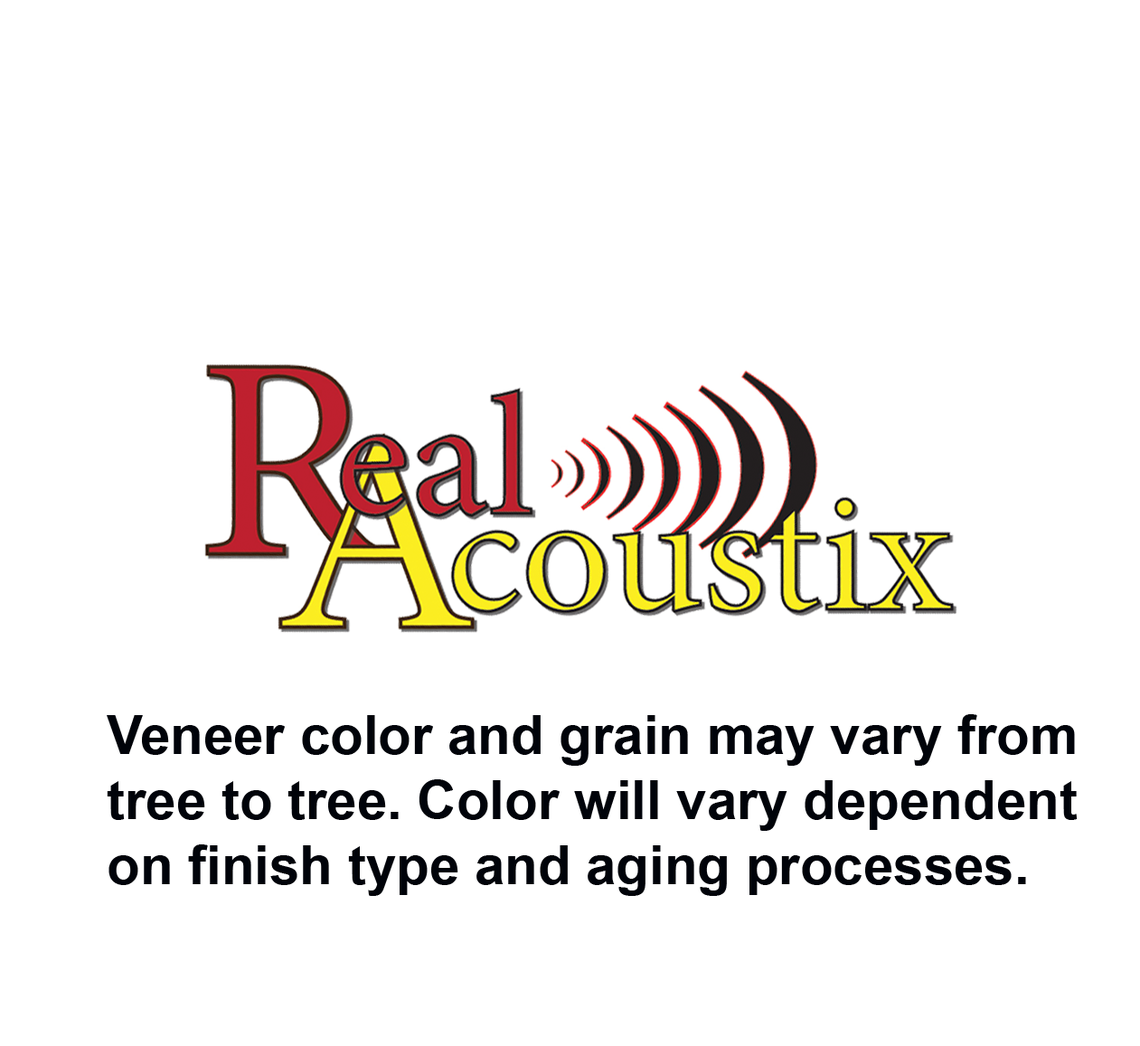
<style>
.page{position:relative;width:1140px;height:1046px;background:#ffffff}
.page>*{position:absolute;margin:0}
.t1{font:54.2px "Arial-BoldMT";color:#00030a}
</style>
<div class="page">
<p class="t1" style="left:107px;top:714px;width:971px;height:182px">Veneer color and grain may vary from<br>tree to tree. Color will vary dependent<br>on finish type and aging processes.</p>
</div>
